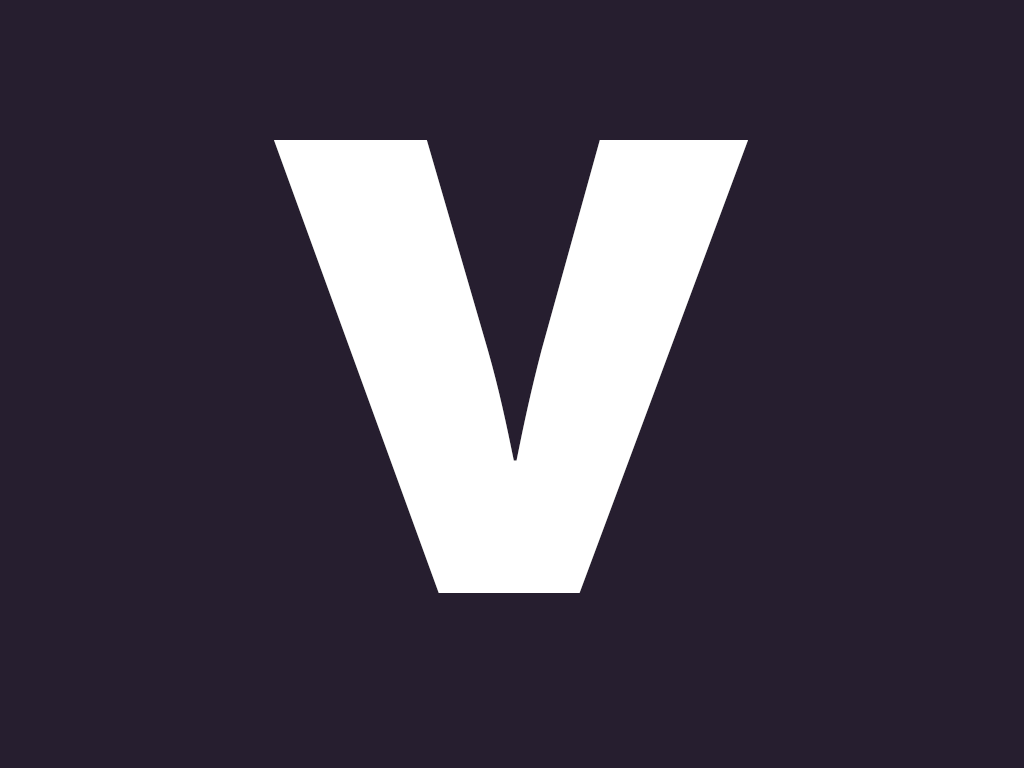
<style>
.page{position:relative;width:1024px;height:768px;background:#261e2f}
.page>*{position:absolute;margin:0}
.t1{font:1296px "MyriadArabic-Bold";color:#ffffff}
</style>
<div class="page">
<p class="t1" style="left:274px;top:140px;width:474px;height:453px">v</p>
</div>
